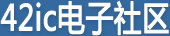
<style>
.page{position:relative;width:170px;height:36px;background:#ffffff}
.page>*{position:absolute;margin:0}
.t1{font:34.8px "MicrosoftYaHei";color:#ffffff;font-weight:bold;scale:0.79 1}
</style>
<div class="page">
<p class="t1" style="left:0px;top:0px;width:169px;height:36px">42ic电子社区</p>
</div>
